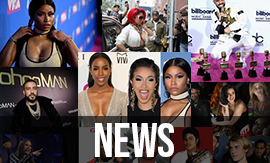
<style>
.page{position:relative;width:270px;height:163px}
.page>*{position:absolute;margin:0}
.t1{font:47.8px "BebasNeue-Regular";color:#ffffff}
</style>
<div class="page">
<p class="t1" style="left:95px;top:123px;width:79px;height:34px">NEWS</p>
</div>
